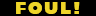
<style>
.page{position:relative;width:96px;height:16px;background:#000000}
.page>*{position:absolute;margin:0}
.t1{font:17.8px "Skia_2.919wght";letter-spacing:0.075em;color:#eed529;scale:1.03 1}
</style>
<div class="page">
<p class="t1" style="left:16px;top:2px;width:64px;height:12px">FOUL!</p>
</div>
